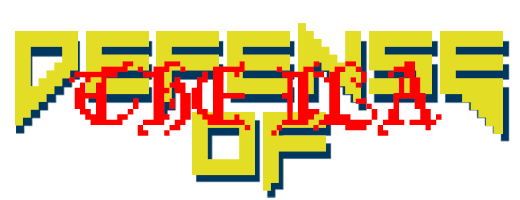
<style>
.page{position:relative;width:520px;height:200px;background:#ffffff}
.page>*{position:absolute;margin:0}
.t1{font:125.9px "Vermin-Vibes-1989";color:#e4dd26}
.t2{font:85.1px "Bitmgothic";color:#fe0000}
</style>
<div class="page">
<p class="t1" style="left:15px;top:23px;width:488px;height:103px">DEFENSE</p>
<p class="t2" style="left:69px;top:61px;width:373px;height:75px">THE ILA</p>
<p class="t1" style="left:192px;top:112px;width:134px;height:79px">OF</p>
</div>
